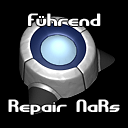
<style>
.page{position:relative;width:128px;height:128px;background:#000000}
.page>*{position:absolute;margin:0}
.t1{font:18px "GravitateBRK";color:#ffffff}
</style>
<div class="page">
<p class="t1" style="left:8px;top:99px;width:112px;height:16px">Repair NaRs</p>
</div>
